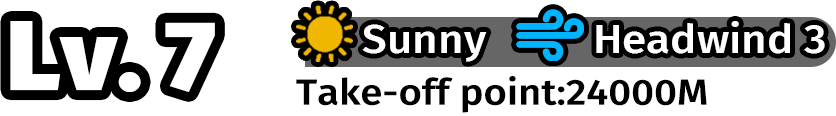
<style>
.page{position:relative;width:836px;height:116px;background:#ffffff}
.page>*{position:absolute;margin:0}
.t1{font:99px "FiraSans-Black";color:#ffffff;scale:1.07 1}
.t2{font:39.6px "FiraSans-Medium";color:#ffffff;scale:1.11 1}
.t3{font:36px "FiraSans-Medium";color:#000000;scale:1.11 1}
</style>
<div class="page">
<p class="t1" style="left:10px;top:21px;width:205px;height:71px">Lv. 7</p>
<p class="t2" style="left:362px;top:24px;width:125px;height:38px">Sunny</p>
<p class="t2" style="left:596px;top:21px;width:229px;height:33px">Headwind 3</p>
<p class="t3" style="left:296px;top:75px;width:411px;height:38px">Take-off point:24000M</p>
</div>
